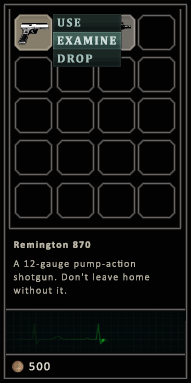
<style>
.page{position:relative;width:191px;height:383px;background:#020202}
.page>*{position:absolute;margin:0}
.t1{font:11.9px "Cambria-Bold";letter-spacing:0.115em;color:#a8beba}
.t2{font:11.9px "Cambria-Bold";letter-spacing:0.115em;color:#d0dbda}
.t3{font:10px/13.4px "Calibri-Light";letter-spacing:0.115em;color:#bcb7a8}
.t4{font:10px/17.3px "Calibri-Bold";letter-spacing:0.115em;color:#bcb7a8}
.t5{font:12px "Calibri";letter-spacing:0.115em;color:#dfdcd1}
</style>
<div class="page">
<p class="t1" style="left:57px;top:18px;width:24px;height:9px">USE</p>
<p class="t2" style="left:57px;top:36px;width:59px;height:9px">EXAMINE</p>
<p class="t1" style="left:57px;top:54px;width:36px;height:9px">DROP</p>
<p class="t3" style="left:13px;top:241px;width:137px;height:53px"><span class="t4">Remington 870<br><br></span>A 12-gauge pump-action shotgun. Don't leave home without it.</p>
<p class="t5" style="left:29px;top:362px;width:21px;height:9px">500</p>
</div>
